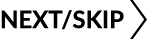
<style>
.page{position:relative;width:149px;height:39px;background:#ffffff}
.page>*{position:absolute;margin:0}
.t1{font:24px "Lato-Bold";color:#000000}
</style>
<div class="page">
<p class="t1" style="left:1px;top:10px;width:123px;height:20px">NEXT/SKIP</p>
</div>
